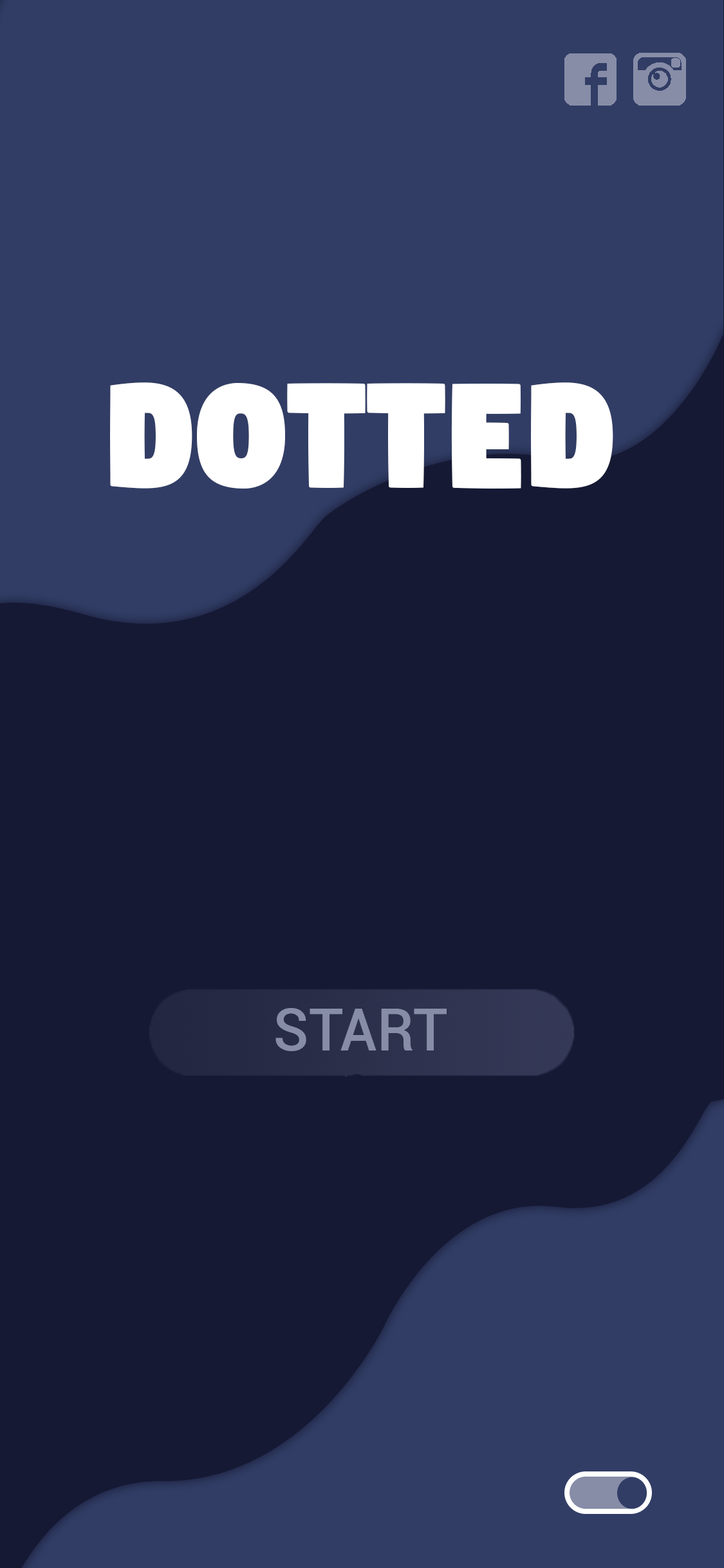
<style>
.page{position:relative;width:724px;height:1568px;background:#151934}
.page>*{position:absolute;margin:0}
.t1{font:173.6px "Digitalt";color:#ffffff}
.t2{font:58.6px "Roboto-Medium";color:#878da7}
</style>
<div class="page">
<p class="t1" style="left:110px;top:382px;width:503px;height:107px">DOTTED</p>
<p class="t2" style="left:275px;top:1008px;width:172px;height:43px">START</p>
</div>
